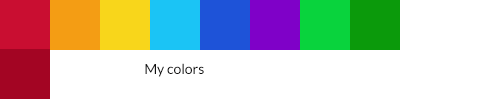
<style>
.page{position:relative;width:500px;height:100px;background:#ffffff}
.page>*{position:absolute;margin:0}
.t1{font:14px "Lato-Regular";color:#111010}
</style>
<div class="page">
<p class="t1" style="left:145px;top:63px;width:59px;height:14px">My colors</p>
</div>
